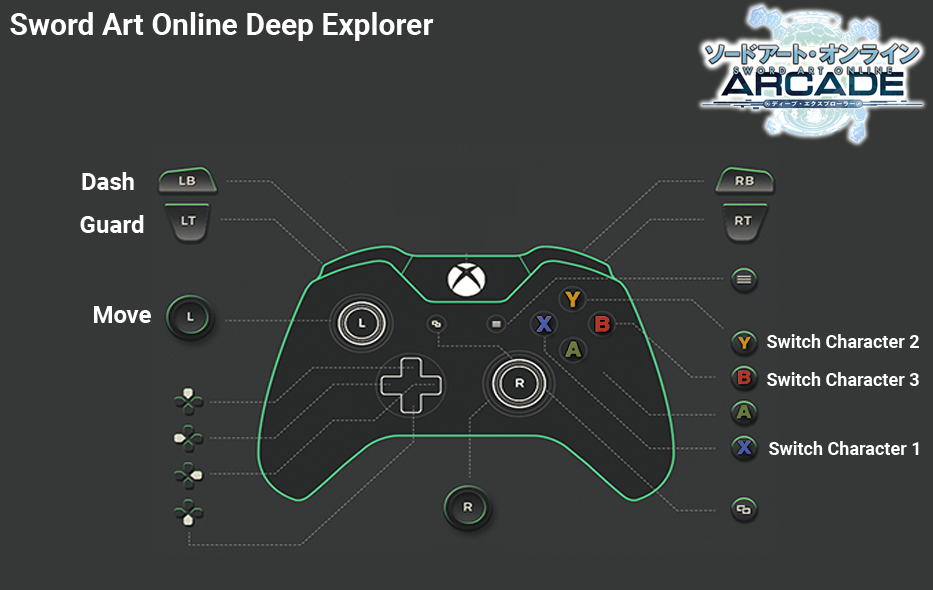
<style>
.page{position:relative;width:933px;height:590px;background:#363838}
.page>*{position:absolute;margin:0}
.t1{font:30px "Roboto-Bold";color:#ffffff}
.t2{font:24px "Roboto-Bold";color:#ffffff}
.t3{font:18px "Roboto-Bold";color:#ffffff}
</style>
<div class="page">
<p class="t1" style="left:10px;top:12px;width:424px;height:29px">Sword Art Online Deep Explorer</p>
<p class="t2" style="left:82px;top:172px;width:52px;height:18px">Dash</p>
<p class="t2" style="left:80px;top:215px;width:64px;height:18px">Guard</p>
<p class="t2" style="left:94px;top:306px;width:57px;height:17px">Move</p>
<p class="t3" style="left:767px;top:334px;width:152px;height:14px">Switch Character 2</p>
<p class="t3" style="left:767px;top:372px;width:152px;height:14px">Switch Character 3</p>
<p class="t3" style="left:769px;top:441px;width:150px;height:14px">Switch Character 1</p>
</div>
